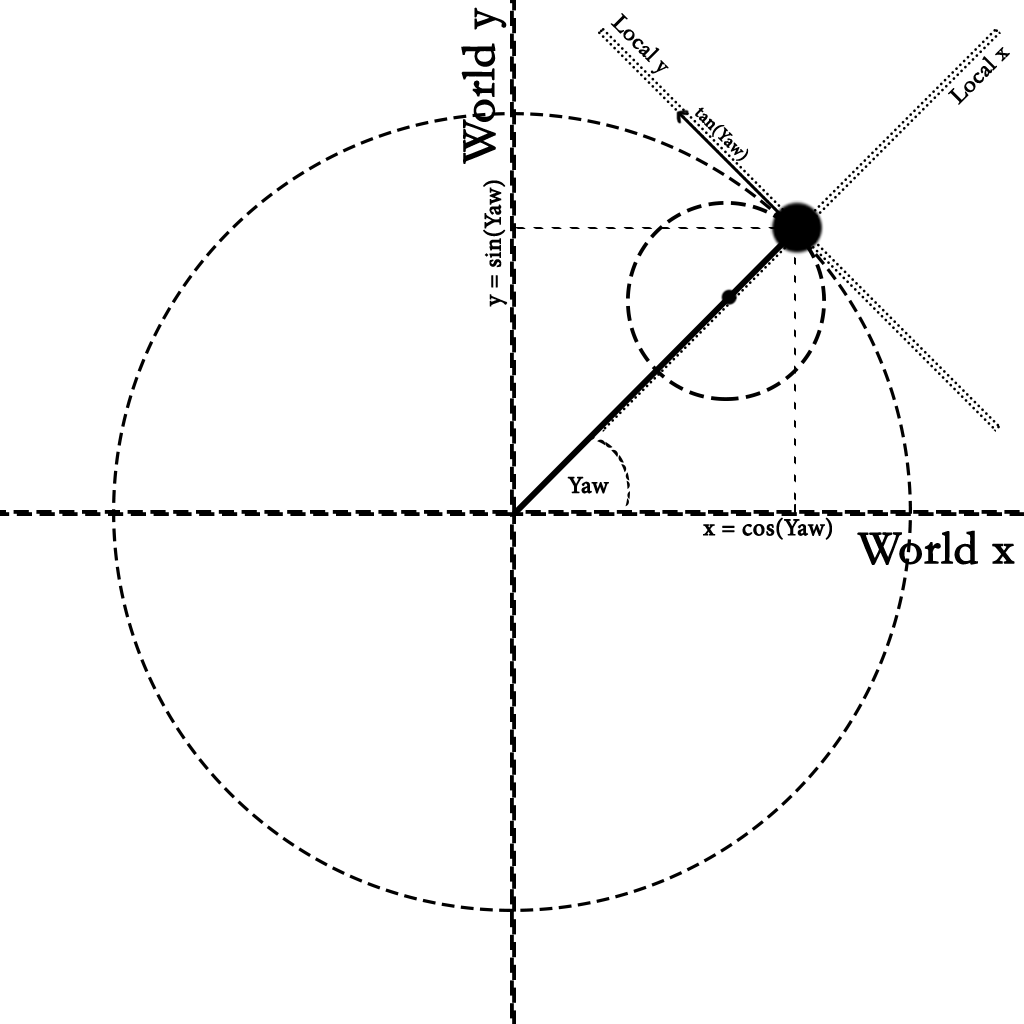
<style>
.page{position:relative;width:1024px;height:1024px;background:#ffffff}
.page>*{position:absolute;margin:0}
.t1{font:48px "Garamond";color:#000000;font-weight:bold}
.t2{font:24px "Garamond";color:#000000;font-weight:bold}
.t3{font:18px "MinionPro-Regular";color:#000000;font-weight:bold}
.t4{font:24px "MinionPro-Regular";color:#000000;font-weight:bold}
</style>
<div class="page">
<p class="t1" style="left:461px;top:7px;width:46px;height:157px;rotate:-90deg">World y</p>
<p class="t2" style="left:610px;top:13px;width:59px;height:61px;rotate:45deg">Local y</p>
<p class="t2" style="left:948px;top:47px;width:62px;height:58px;rotate:-45deg">Local x</p>
<p class="t3" style="left:695px;top:107px;width:54px;height:54px;rotate:45deg">tan(Yaw)</p>
<p class="t4" style="left:483px;top:180px;width:25px;height:127px;rotate:-90deg">y = sin(Yaw)</p>
<p class="t4" style="left:567px;top:476px;width:42px;height:18px">Yaw</p>
<p class="t4" style="left:703px;top:517px;width:129px;height:23px">x = cos(Yaw)</p>
<p class="t1" style="left:857px;top:530px;width:158px;height:35px">World x</p>
</div>
